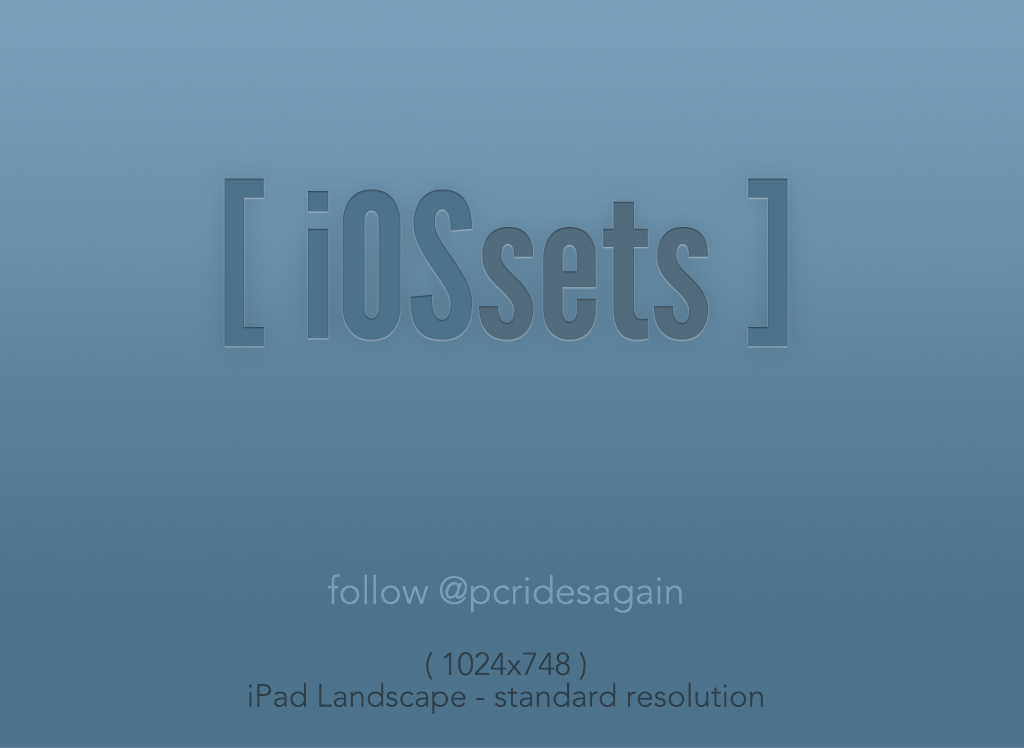
<style>
.page{position:relative;width:1024px;height:748px}
.page>*{position:absolute;margin:0}
.t1{font:199.9px "LeagueGothic";color:#4d728c}
.t2{font:199.9px "LeagueGothic";color:#516c7f}
.t3{font:37.9px "Avenir-Light";color:#789fba}
.t4{font:31.6px/31.6px "Avenir-Light";color:#2e404c}
</style>
<div class="page">
<p class="t1" style="left:224px;top:178px;width:564px;height:169px">[ iOS<span class="t2">sets </span>]</p>
<p class="t3" style="left:328px;top:574px;width:354px;height:39px">follow @pcridesagain</p>
<p class="t4" style="left:249px;top:651px;width:514px;height:63px;text-align:center">( 1024x748 )<br>iPad Landscape - standard resolution</p>
</div>
